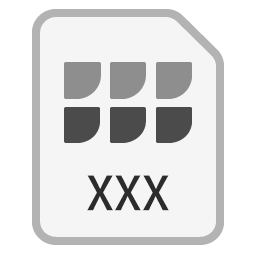
<style>
.page{position:relative;width:256px;height:256px;background:#f5f5f5}
.page>*{position:absolute;margin:0}
.t1{font:45.4px "AdobeHeitiStd-Regular";color:#2c2c2c}
</style>
<div class="page">
<p class="t1" style="left:87px;top:175px;width:82px;height:36px">XXX</p>
</div>
